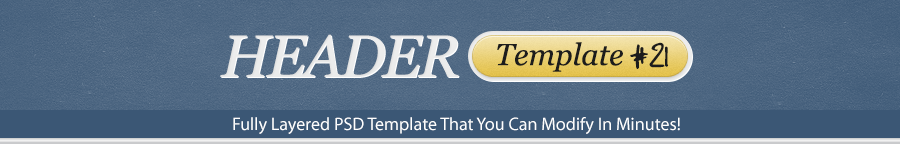
<style>
.page{position:relative;width:900px;height:144px}
.page>*{position:absolute;margin:0}
.t1{font:60px "Georgia-Italic";letter-spacing:-0.05em;color:#ffffff;text-transform:uppercase}
.t2{font:30.3px "Georgia-Italic";color:#1c1c1c}
.t3{font:39.2px "tomshandwrittennew";color:#1c1c1c;text-transform:uppercase}
.t4{font:18px "MyriadPro-Regular";color:#ffffff}
</style>
<div class="page">
<p class="t1" style="left:220px;top:34px;width:239px;height:43px">Header</p>
<p class="t2" style="left:497px;top:42px;width:126px;height:30px">Template</p>
<p class="t3" style="left:630px;top:42px;width:38px;height:27px">#21</p>
<p class="t4" style="left:233px;top:117px;width:447px;height:17px">Fully Layered PSD Template That You Can Modify In Minutes!</p>
</div>
